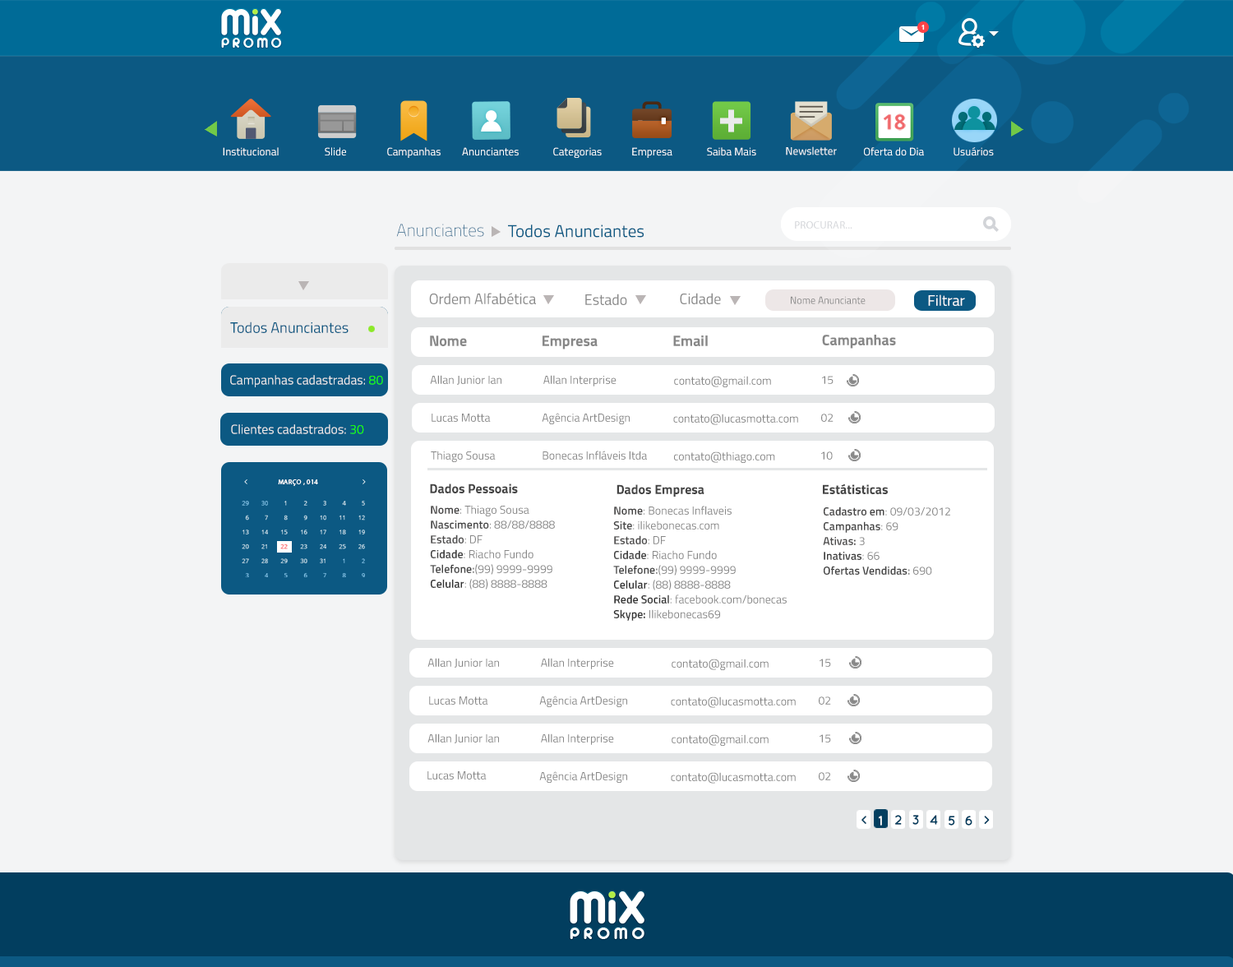
<style>
.page{position:relative;width:1233px;height:967px;background:#f3f4f5}
.page>*{position:absolute;margin:0}
.t1{font:6.6px "OpenSans-Bold";color:#ffffff}
.t2{font:48.5px "TitilliumWeb-Bold";color:#ebebeb}
.t3{font:20.5px "OpenSans-Bold";color:#f0686b;text-transform:uppercase}
.t4{font:11px "TitilliumWeb-Regular";color:#ffffff}
.t5{font:10.7px "MyriadPro-Regular";letter-spacing:0.013em;color:#d2d4d8;text-transform:uppercase}
.t6{font:17.3px "TitilliumWeb-Thin"}
.t7{font:17.3px "TitilliumWeb-Regular";color:#0c5983}
.t8{font:15px "TitilliumWeb-Regular";color:#878787}
.t9{font:10.2px "TitilliumWeb-Regular";color:#878787}
.t10{font:15px "TitilliumWeb-Regular";color:#ffffff}
.t11{font:15px "TitilliumWeb-Regular";color:#0c5983}
.t12{font:15px "TitilliumWeb-Bold";color:#878787}
.t13{font:13px "TitilliumWeb-Regular";color:#ebebeb}
.t14{font:13px "TitilliumWeb-Regular";color:#1bff03}
.t15{font:11.5px "TitilliumWeb-Regular";color:#878787}
.t16{font:6.7px "MyriadPro-Regular";letter-spacing:0.051em;color:#ffffff;text-transform:uppercase}
.t17{font:13.2px "TitilliumWeb-Bold";color:#434343}
.t18{font:5.8px/14.4px "OpenSans";text-transform:uppercase}
.t19{font:11.5px/14.8px "TitilliumWeb-Regular";color:#878787}
.t20{font:11.5px/14.8px "TitilliumWeb-SemiBold";color:#454444}
.t21{font:11.5px/14.8px "TitilliumWeb-SemiBold";color:#464646}
.t22{font:11.5px/14.8px "TitilliumWeb-SemiBold";color:#4d4c4c}
.t23{font:11.5px/14.8px "TitilliumWeb-SemiBold";color:#3e3e3e}
.t24{font:11.5px/14.8px "TitilliumWeb-SemiBold";color:#454545}
.t25{font:11.5px/14.8px "TitilliumWeb-SemiBold";color:#878787}
.t26{font:11.5px/14.8px "TitilliumWeb-SemiBold";color:#323232}
.t27{font:11.5px/14.8px "TitilliumWeb-Light";color:#878787}
.t28{font:11.6px "QuicksandBold-Regular";color:#023e5f}
.t29{font:13.5px "QuicksandBold-Regular";color:#ffffff}
.t30{font:13.5px "QuicksandBold-Regular";color:#023e5f}
</style>
<div class="page">
<p class="t1" style="left:922px;top:25px;width:3px;height:5px">1</p>
<p class="t2" style="left:720px;top:109px;width:22px;height:23px">+</p>
<p class="t3" style="left:884px;top:113px;width:22px;height:18px">18</p>
<p class="t4" style="left:223px;top:147px;width:56px;height:9px">Institucional</p>
<p class="t4" style="left:325px;top:147px;width:21px;height:9px">Slide</p>
<p class="t4" style="left:387px;top:147px;width:54px;height:11px">Campanhas</p>
<p class="t4" style="left:462px;top:147px;width:57px;height:9px">Anunciantes</p>
<p class="t4" style="left:553px;top:147px;width:49px;height:11px">Categorias</p>
<p class="t4" style="left:632px;top:147px;width:41px;height:11px">Empresa</p>
<p class="t4" style="left:707px;top:147px;width:49px;height:9px">Saiba Mais</p>
<p class="t4" style="left:786px;top:146px;width:51px;height:9px">Newsletter</p>
<p class="t4" style="left:864px;top:147px;width:60px;height:9px">Oferta do Dia</p>
<p class="t4" style="left:954px;top:147px;width:40px;height:9px">Usuários</p>
<p class="t5" style="left:795px;top:221px;width:58px;height:8px">PROCURAR...</p>
<p class="t6" style="left:396px;top:224px;width:88px;height:13px">Anunciantes</p>
<p class="t7" style="left:508px;top:224px;width:136px;height:14px">Todos Anunciantes</p>
<p class="t8" style="left:429px;top:293px;width:107px;height:11px">Ordem Alfabética</p>
<p class="t8" style="left:585px;top:294px;width:42px;height:11px">Estado</p>
<p class="t8" style="left:680px;top:293px;width:41px;height:11px">Cidade</p>
<p class="t9" style="left:791px;top:296px;width:75px;height:8px">Nome Anunciante</p>
<p class="t10" style="left:928px;top:294px;width:37px;height:12px">Filtrar</p>
<p class="t11" style="left:230px;top:321px;width:119px;height:12px">Todos Anunciantes</p>
<p class="t12" style="left:430px;top:335px;width:37px;height:11px">Nome</p>
<p class="t12" style="left:543px;top:335px;width:55px;height:14px">Empresa</p>
<p class="t12" style="left:673px;top:335px;width:35px;height:11px">Email</p>
<p class="t12" style="left:822px;top:335px;width:74px;height:14px">Campanhas</p>
<p class="t13" style="left:230px;top:375px;width:153px;height:12px">Campanhas cadastradas: <span class="t14">80</span></p>
<p class="t15" style="left:430px;top:375px;width:72px;height:10px">Allan Junior Ian</p>
<p class="t15" style="left:543px;top:375px;width:74px;height:11px">Allan Interprise</p>
<p class="t15" style="left:674px;top:376px;width:97px;height:11px">contato@gmail.com</p>
<p class="t15" style="left:822px;top:376px;width:12px;height:8px">15</p>
<p class="t15" style="left:432px;top:414px;width:59px;height:8px">Lucas Motta</p>
<p class="t15" style="left:542px;top:413px;width:88px;height:11px">Agência ArtDesign</p>
<p class="t15" style="left:673px;top:414px;width:125px;height:11px">contato@lucasmotta.com</p>
<p class="t15" style="left:821px;top:414px;width:13px;height:8px">02</p>
<p class="t13" style="left:231px;top:424px;width:133px;height:10px">Clientes cadastrados: <span class="t14">30</span></p>
<p class="t15" style="left:431px;top:451px;width:65px;height:11px">Thiago Sousa</p>
<p class="t15" style="left:543px;top:451px;width:104px;height:9px">Bonecas Infláveis ltda</p>
<p class="t15" style="left:674px;top:451px;width:101px;height:12px">contato@thiago.com</p>
<p class="t15" style="left:821px;top:451px;width:12px;height:9px">10</p>
<p class="t16" style="left:278px;top:479px;width:40px;height:7px">MARÇO , 014</p>
<p class="t17" style="left:430px;top:483px;width:88px;height:10px">Dados Pessoais</p>
<p class="t17" style="left:617px;top:484px;width:88px;height:13px">Dados Empresa</p>
<p class="t17" style="left:823px;top:483px;width:65px;height:11px">Estátisticas</p>
<p class="t18" style="left:242px;top:501px;width:7px;height:76px;text-align:right">29<br>6<br>13<br>20<br>27<br>3</p>
<p class="t18" style="left:261px;top:501px;width:7px;height:76px;text-align:right">30<br>7<br>14<br>21<br>28<br>4</p>
<p class="t18" style="left:280px;top:501px;width:8px;height:76px;text-align:right">1<br>8<br>15<br>22<br>29<br>5</p>
<p class="t18" style="left:300px;top:501px;width:7px;height:76px;text-align:right">2<br>9<br>16<br>23<br>30<br>6</p>
<p class="t18" style="left:320px;top:501px;width:6px;height:76px;text-align:right">3<br>10<br>17<br>24<br>31<br>7</p>
<p class="t18" style="left:339px;top:501px;width:7px;height:76px;text-align:right">4<br>11<br>18<br>25<br>1<br>8</p>
<p class="t18" style="left:358px;top:501px;width:7px;height:76px;text-align:right">5<br>12<br>19<br>26<br>2<br>9</p>
<p class="t19" style="left:430px;top:505px;width:125px;height:85px"><span class="t20">Nome</span>: Thiago Sousa<br><span class="t21">Nascimento</span>: 88/88/8888<br><span class="t22">Estado</span>: DF<br><span class="t23">Cidade</span>: Riacho Fundo<br><span class="t24">Telefone</span><span class="t25">:</span>(99) 9999-9999<br><span class="t26">Celular</span>: (88) 8888-8888</p>
<p class="t19" style="left:613px;top:506px;width:174px;height:115px"><span class="t20">Nome</span>: Bonecas Inflaveis<br><span class="t21">Site</span>: ilikebonecas.com<br><span class="t22">Estado</span>: DF<br><span class="t23">Cidade</span>: Riacho Fundo<br><span class="t24">Telefone</span><span class="t25">:</span>(99) 9999-9999<br><span class="t26">Celular</span>: (88) 8888-8888<br><span class="t26">Rede Social</span>: <span class="t27">f</span>acebook.com/bonecas<br><span class="t26">Skype:</span> Ilikebonecas69</p>
<p class="t24" style="left:823px;top:506px;width:127px;height:69px"><span class="t20">Cadastro em</span><span class="t19">: 09/03/2012<br></span><span class="t21">Campanhas</span><span class="t19">: 69<br></span><span class="t22">Ativas:</span><span class="t19"> 3<br></span><span class="t23">Inativas</span><span class="t19">: 66<br></span>Ofertas Vendidas<span class="t25">: </span><span class="t19">690</span></p>
<p class="t15" style="left:428px;top:658px;width:71px;height:10px">Allan Junior Ian</p>
<p class="t15" style="left:541px;top:658px;width:73px;height:11px">Allan Interprise</p>
<p class="t15" style="left:672px;top:659px;width:97px;height:11px">contato@gmail.com</p>
<p class="t15" style="left:820px;top:659px;width:11px;height:8px">15</p>
<p class="t15" style="left:429px;top:696px;width:59px;height:9px">Lucas Motta</p>
<p class="t15" style="left:539px;top:696px;width:88px;height:11px">Agência ArtDesign</p>
<p class="t15" style="left:671px;top:696px;width:125px;height:12px">contato@lucasmotta.com</p>
<p class="t15" style="left:819px;top:696px;width:12px;height:9px">02</p>
<p class="t15" style="left:428px;top:733px;width:71px;height:10px">Allan Junior Ian</p>
<p class="t15" style="left:541px;top:733px;width:73px;height:12px">Allan Interprise</p>
<p class="t15" style="left:672px;top:734px;width:97px;height:12px">contato@gmail.com</p>
<p class="t15" style="left:820px;top:734px;width:11px;height:8px">15</p>
<p class="t15" style="left:428px;top:771px;width:59px;height:8px">Lucas Motta</p>
<p class="t15" style="left:539px;top:771px;width:88px;height:12px">Agência ArtDesign</p>
<p class="t15" style="left:671px;top:772px;width:125px;height:12px">contato@lucasmotta.com</p>
<p class="t15" style="left:819px;top:772px;width:12px;height:8px">02</p>
<p class="t28" style="left:862px;top:816px;width:5px;height:8px">&lt;</p>
<p class="t29" style="left:879px;top:816px;width:3px;height:9px">1</p>
<p class="t30" style="left:895px;top:815px;width:7px;height:10px">2</p>
<p class="t30" style="left:913px;top:815px;width:6px;height:10px">3</p>
<p class="t30" style="left:930px;top:815px;width:8px;height:10px">4</p>
<p class="t30" style="left:949px;top:816px;width:6px;height:9px">5</p>
<p class="t30" style="left:965px;top:816px;width:8px;height:9px">6</p>
<p class="t28" style="left:984px;top:816px;width:6px;height:8px">&gt;</p>
</div>
